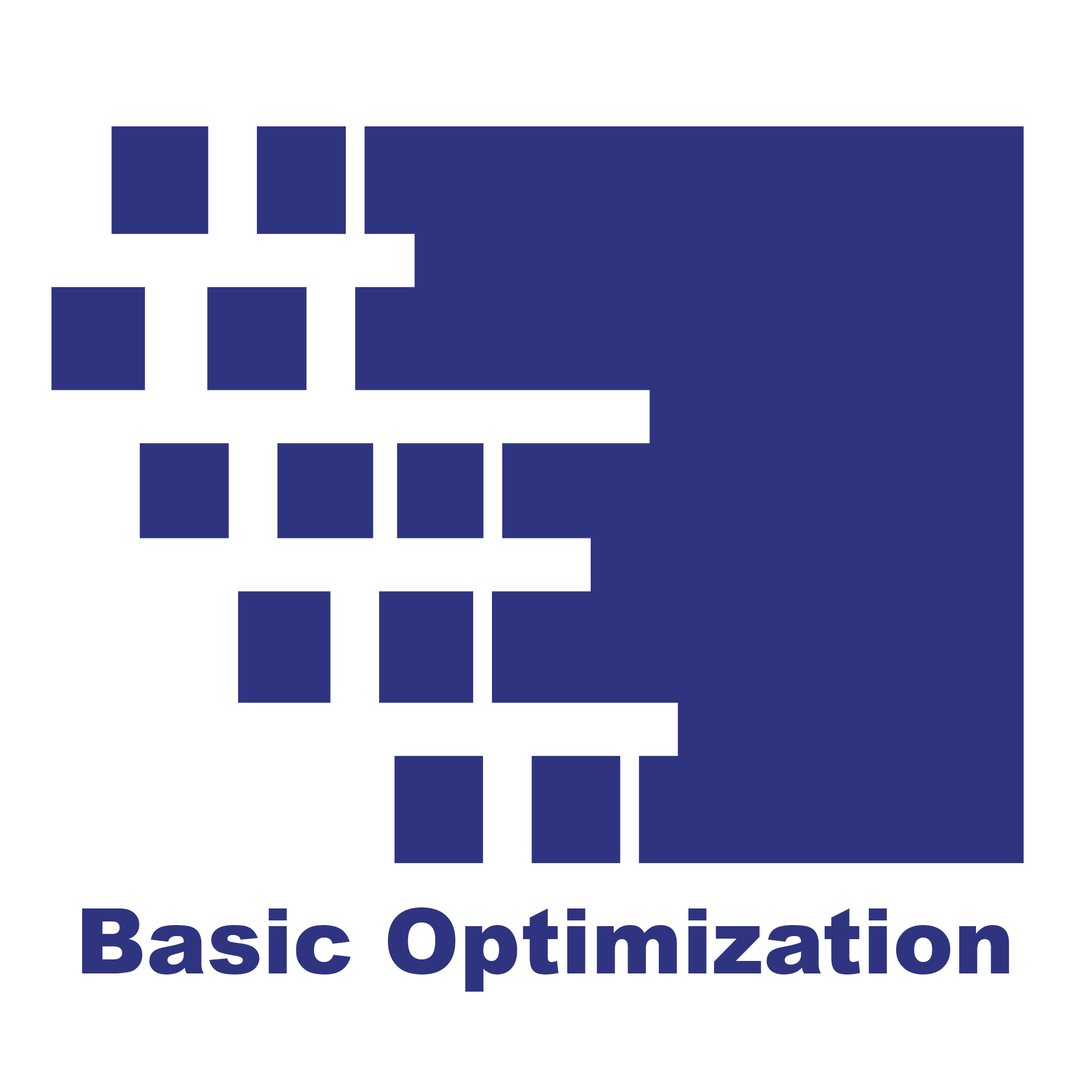
<style>
.page{position:relative;width:1092px;height:1092px;background:#ffffff}
.page>*{position:absolute;margin:0}
.t1{font:91px "Arial-Black";color:#2f3481}
</style>
<div class="page">
<p class="t1" style="left:82px;top:907px;width:927px;height:85px">Basic Optimization</p>
</div>
